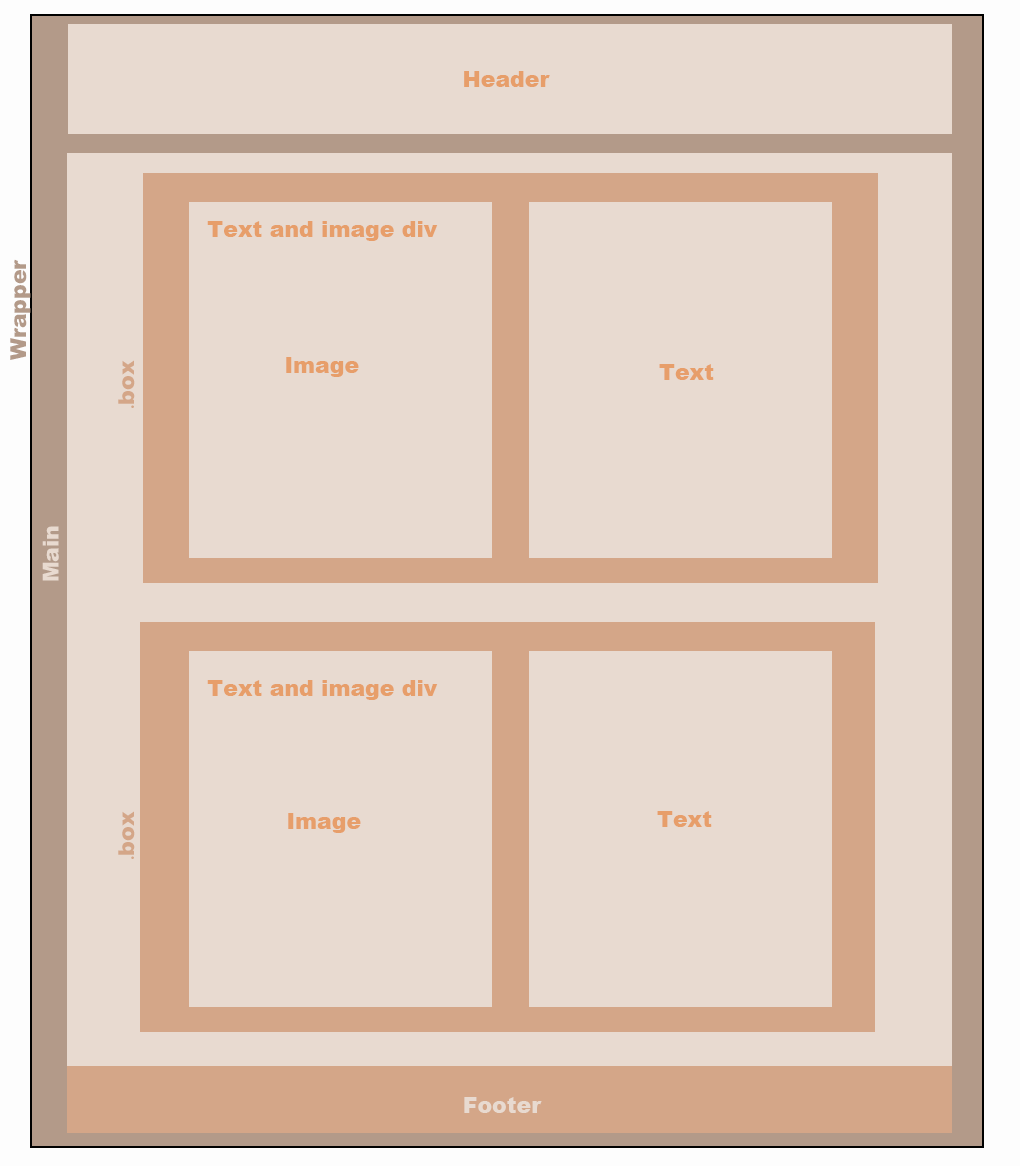
<style>
.page{position:relative;width:1020px;height:1166px;background:#e8dad0}
.page>*{position:absolute;margin:0}
.t1{font:22px "Arial-Black";color:#e79e6a}
.t2{font:22px "Arial-Black";color:#b39a89}
.t3{font:22px "Arial-Black";color:#d4a688}
.t4{font:22px "KozGoPr6N-Regular";color:#d4a688}
.t5{font:22px "Arial-Black";color:#e8dad0}
</style>
<div class="page">
<p class="t1" style="left:464px;top:71px;width:86px;height:16px">Header</p>
<p class="t1" style="left:207px;top:221px;width:231px;height:20px">Text and image div</p>
<p class="t2" style="left:10px;top:259px;width:21px;height:101px;rotate:180deg">Wrapper</p>
<p class="t3" style="left:118px;top:360px;width:17px;height:48px;rotate:180deg"><span class="t4">.</span>box</p>
<p class="t1" style="left:286px;top:357px;width:73px;height:20px">Image</p>
<p class="t1" style="left:659px;top:364px;width:55px;height:16px">Text</p>
<p class="t5" style="left:42px;top:526px;width:17px;height:55px;rotate:180deg">Main</p>
<p class="t1" style="left:207px;top:680px;width:231px;height:20px">Text and image div</p>
<p class="t3" style="left:118px;top:811px;width:17px;height:48px;rotate:180deg"><span class="t4">.</span>box</p>
<p class="t1" style="left:288px;top:813px;width:73px;height:20px">Image</p>
<p class="t1" style="left:657px;top:811px;width:55px;height:16px">Text</p>
<p class="t5" style="left:464px;top:1097px;width:78px;height:16px">Footer</p>
</div>
